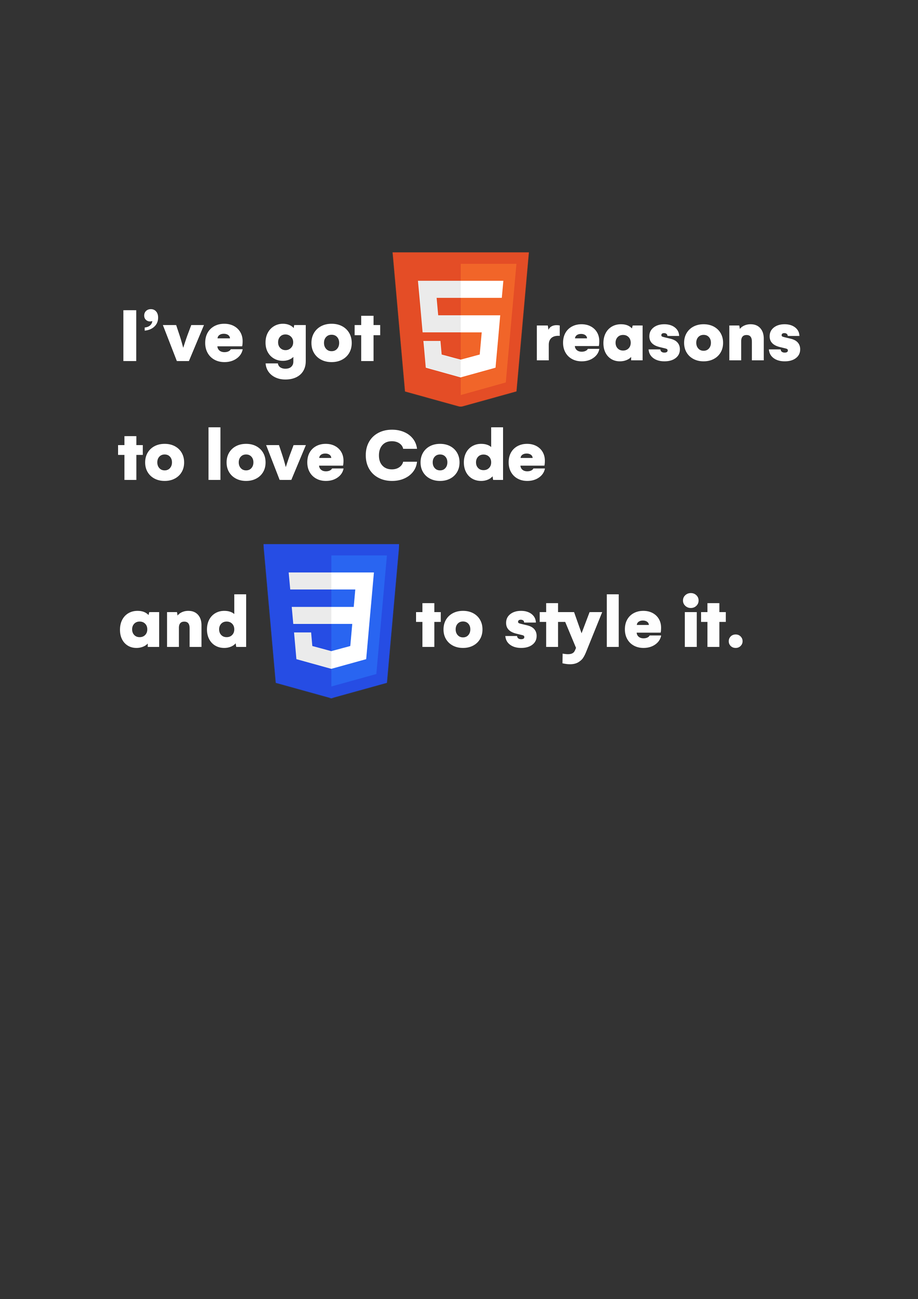
<style>
.page{position:relative;width:918px;height:1299px;background:#333333}
.page>*{position:absolute;margin:0}
.t1{font:79px "Gelion-Black";color:#ffffff}
.t2{font:76.7px "Gelion-Black";color:#ffffff}
.t3{font:76.7px "Gelion-Black";color:#fefefe}
</style>
<div class="page">
<p class="t1" style="left:123px;top:309px;width:258px;height:70px">I’ve got</p>
<p class="t2" style="left:537px;top:324px;width:263px;height:37px">reasons</p>
<p class="t2" style="left:118px;top:427px;width:427px;height:54px">to love Code</p>
<p class="t2" style="left:120px;top:594px;width:126px;height:54px">and</p>
<p class="t3" style="left:416px;top:593px;width:327px;height:71px">to style it.</p>
</div>
